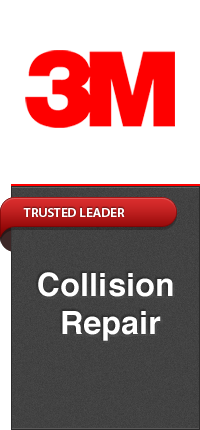
<style>
.page{position:relative;width:200px;height:430px;background:#ffffff}
.page>*{position:absolute;margin:0}
.t1{font:12px "MyriadPro-Semibold";color:#ffffff;text-transform:uppercase;scale:1.1 1}
.t2{font:32px "Helvetica-Bold";letter-spacing:0.01em;color:#ffffff}
</style>
<div class="page">
<p class="t1" style="left:23px;top:208px;width:102px;height:9px">TRUSTED LEADER</p>
<p class="t2" style="left:38px;top:272px;width:135px;height:69px;text-align:center">Collision<br> Repair</p>
</div>
